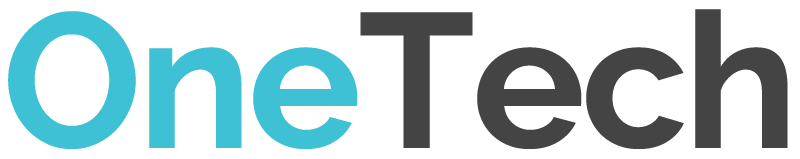
<style>
.page{position:relative;width:800px;height:159px;background:#ffffff}
.page>*{position:absolute;margin:0}
.t1{font:189.8px "Raleway-Bold";letter-spacing:-0.02em;color:#444444}
.t2{font:189.8px "Raleway-Bold";letter-spacing:-0.02em;color:#3ec1d5}
</style>
<div class="page">
<p class="t1" style="left:8px;top:9px;width:780px;height:140px"><span class="t2">One</span>Tech</p>
</div>
